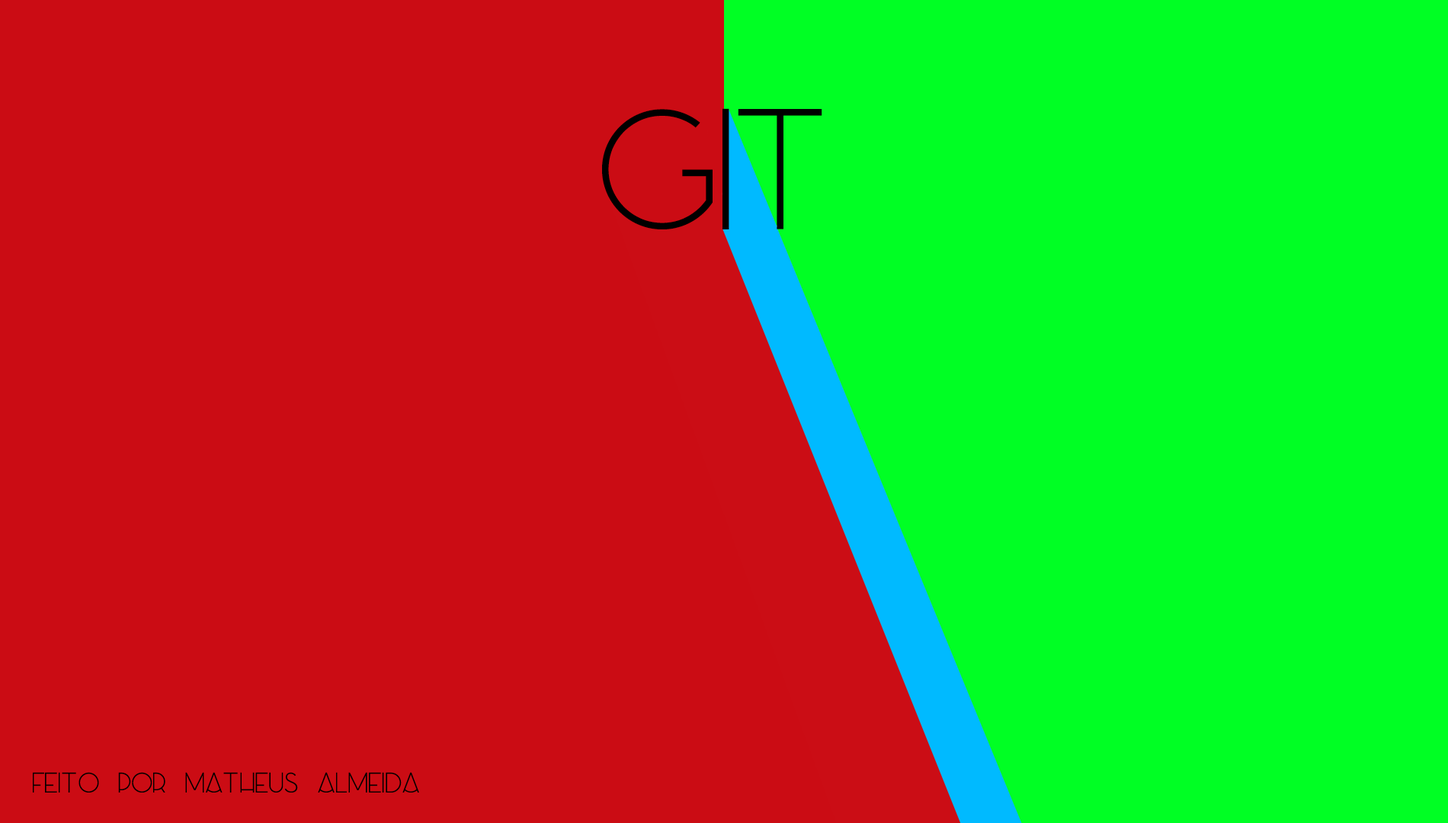
<style>
.page{position:relative;width:1448px;height:823px;background:#cb0c14}
.page>*{position:absolute;margin:0}
.t1{font:229.6px "Azedo-Light";color:#000000}
.t2{font:37.8px "Azedo-Light";color:#000000}
</style>
<div class="page">
<p class="t1" style="left:602px;top:108px;width:128px;height:121px">GI</p>
<p class="t1" style="left:738px;top:109px;width:85px;height:120px">T</p>
<p class="t2" style="left:33px;top:772px;width:386px;height:21px">FEITO POR MATHEUS ALMEIDA</p>
</div>
